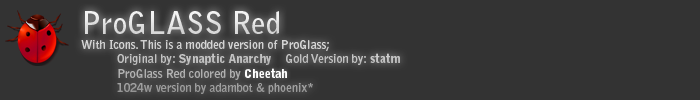
<style>
.page{position:relative;width:700px;height:100px;background:#333333}
.page>*{position:absolute;margin:0}
.t1{font:12px "BellGothicStd-Bold"}
.t2{font:30px "BellGothicStd-Bold"}
.t3{font:12px "BellGothicStd-Black"}
.t4{font:12px "BellGothicStd-Black";color:#ffffff}
</style>
<div class="page">
<p class="t1" style="left:81px;top:11px;width:319px;height:83px"><span class="t2">ProGLASS Red<br></span>With Icons. This is a modded version of ProGlass; <br> Original by: <span class="t3">Synaptic Anarchy</span>    Gold Version by: <span class="t3">statm</span> <br> ProGlass Red colored by<br> 1024w version by adambot &amp; phoenix*</p>
<p class="t4" style="left:245px;top:68px;width:42px;height:10px">Cheetah</p>
</div>
